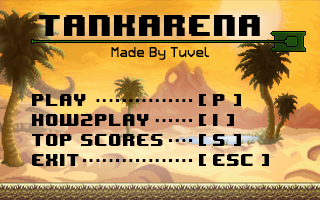
<style>
.page{position:relative;width:320px;height:200px}
.page>*{position:absolute;margin:0}
.t1{font:25px "8BITWONDERNominal";color:#000000}
.t2{font:12.8px "Retron2000";color:#000000}
.t3{font:14px "8BITWONDERNominal";color:#000000}
.t4{font:14px "Bauhaus93";color:#000000}
.t5{font:14px "8BITWONDERNominal";color:#010101}
</style>
<div class="page">
<p class="t1" style="left:39px;top:15px;width:221px;height:21px">tankarena</p>
<p class="t2" style="left:111px;top:47px;width:98px;height:13px">Made By Tuvel</p>
<p class="t3" style="left:32px;top:94px;width:54px;height:12px">PLAY</p>
<p class="t4" style="left:96px;top:99px;width:97px;height:3px">- - - - - - - - - - - - - - -</p>
<p class="t3" style="left:199px;top:94px;width:42px;height:12px">[ p ]</p>
<p class="t3" style="left:32px;top:114px;width:117px;height:12px">how2play</p>
<p class="t4" style="left:155px;top:119px;width:38px;height:3px">- - - - - -</p>
<p class="t3" style="left:199px;top:114px;width:35px;height:12px">[ i ]</p>
<p class="t5" style="left:32px;top:134px;width:131px;height:12px">TOP SCORES</p>
<p class="t3" style="left:199px;top:134px;width:42px;height:12px">[ s ]</p>
<p class="t4" style="left:169px;top:139px;width:24px;height:3px">- - - -</p>
<p class="t3" style="left:32px;top:154px;width:47px;height:12px">exit</p>
<p class="t4" style="left:83px;top:159px;width:110px;height:3px">- - - - - - - - - - - - - - - - -</p>
<p class="t3" style="left:199px;top:154px;width:70px;height:12px">[ esc ]</p>
</div>
